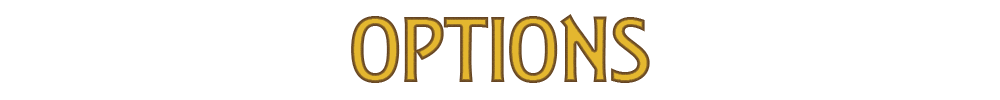
<style>
.page{position:relative;width:1000px;height:100px;background:#ffffff}
.page>*{position:absolute;margin:0}
.t1{font:100px "ARESSENCE"}
</style>
<div class="page">
<p class="t1" style="left:351px;top:14px;width:299px;height:69px">OPTIONS</p>
</div>
